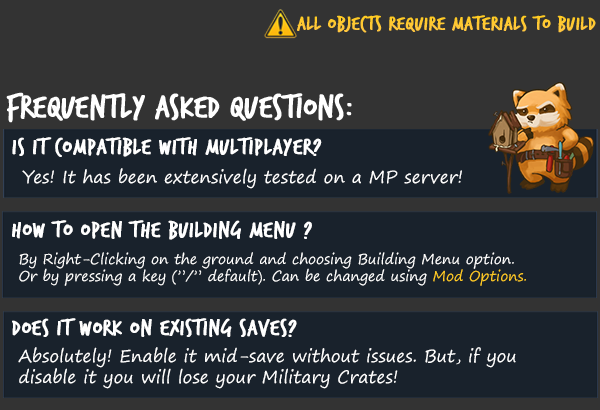
<style>
.page{position:relative;width:600px;height:410px;background:#19222c}
.page>*{position:absolute;margin:0}
.t1{font:20.8px "TrashHand";letter-spacing:0.025em;color:#ffcc21;font-weight:bold}
.t2{font:34.5px "TrashHand";color:#ffffff;font-weight:bold}
.t3{font:23.9px "TrashHand";letter-spacing:0.025em;color:#ffffff;font-weight:bold}
.t4{font:17.3px "SegoePrint";color:#ffffff}
.t5{font:14.2px "SegoePrint";color:#ffffff}
.t6{font:14.2px "SegoePrint";color:#ffcb23}
</style>
<div class="page">
<p class="t1" style="left:297px;top:15px;width:299px;height:18px">All OBJECTS REQUIRE MATERIALS TO BUILD</p>
<p class="t2" style="left:6px;top:92px;width:346px;height:31px">Frequently Asked Questions:</p>
<p class="t3" style="left:12px;top:137px;width:310px;height:20px">Is it compatible with Multiplayer?</p>
<p class="t4" style="left:22px;top:168px;width:440px;height:21px">Yes! It has been extensively tested on a MP server!</p>
<p class="t3" style="left:12px;top:220px;width:300px;height:20px">How to open the BUILDING Menu ?</p>
<p class="t5" style="left:19px;top:252px;width:507px;height:34px">By Right-Clicking on the ground and choosing Building Menu option. <br>Or by pressing a key (”/” default). Can be changed using <span class="t6">Mod Options.</span></p>
<p class="t3" style="left:12px;top:318px;width:285px;height:19px">Does it work on existing saves?</p>
<p class="t4" style="left:18px;top:347px;width:498px;height:42px">Absolutely! Enable it mid-save without issues. But, if you <br>disable it you will lose your Military Crates!</p>
</div>
